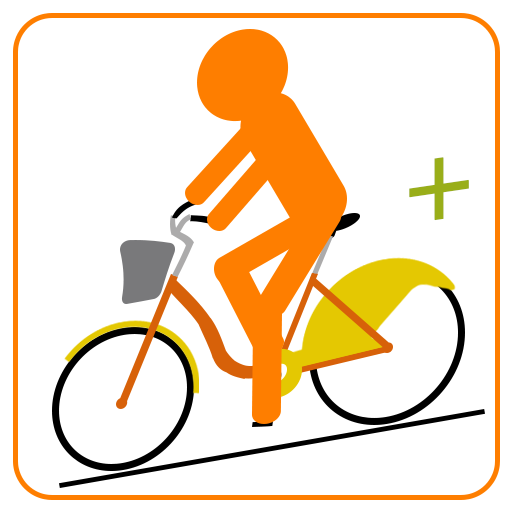
<style>
.page{position:relative;width:512px;height:512px;background:#ffffff}
.page>*{position:absolute;margin:0}
.t1{font:100.2px "AdobeFanHeitiStd-Bold";color:#99ae19;font-weight:bold}
</style>
<div class="page">
<p class="t1" style="left:409px;top:157px;width:60px;height:64px;rotate:172deg">+</p>
</div>
